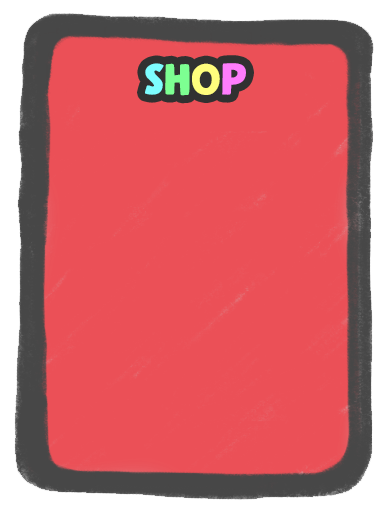
<style>
.page{position:relative;width:390px;height:514px;background:#eb5057}
.page>*{position:absolute;margin:0}
.t1{font:45px "GumboDEMO-Regular";color:#7dfdff}
.t2{font:45px "GumboDEMO-Regular";color:#7dff92}
.t3{font:45px "GumboDEMO-Regular";color:#fffd7d}
.t4{font:45px "GumboDEMO-Regular";color:#ff7dfd}
</style>
<div class="page">
<p class="t1" style="left:145px;top:63px;width:101px;height:33px">S<span class="t2">H</span><span class="t3">O</span><span class="t4">P</span></p>
</div>
